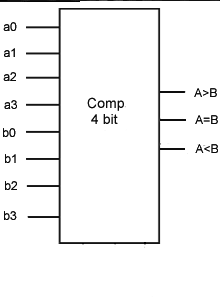
<style>
.page{position:relative;width:220px;height:300px;background:#ffffff}
.page>*{position:absolute;margin:0}
.t1{font:12px "ArialMT"}
</style>
<div class="page">
<p class="t1" style="left:3px;top:21px;width:14px;height:9px">a0</p>
<p class="t1" style="left:4px;top:47px;width:11px;height:9px">a1</p>
<p class="t1" style="left:194px;top:87px;width:23px;height:9px">A&gt;B</p>
<p class="t1" style="left:195px;top:114px;width:23px;height:9px">A=B</p>
<p class="t1" style="left:3px;top:127px;width:13px;height:9px">b0</p>
<p class="t1" style="left:195px;top:143px;width:23px;height:9px">A&lt;B</p>
<p class="t1" style="left:5px;top:153px;width:11px;height:9px">b1</p>
<p class="t1" style="left:5px;top:180px;width:12px;height:9px">b2</p>
</div>
